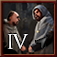
<style>
.page{position:relative;width:57px;height:57px}
.page>*{position:absolute;margin:0}
.t1{font:20px "TrajanPro-Regular";letter-spacing:-0.1em;color:#ffffff}
</style>
<div class="page">
<p class="t1" style="left:7px;top:34px;width:22px;height:15px">IV</p>
</div>
